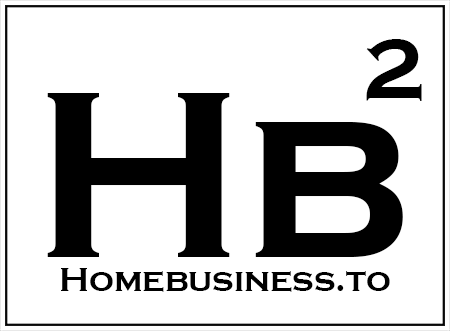
<style>
.page{position:relative;width:450px;height:331px;background:#ffffff}
.page>*{position:absolute;margin:0}
.t1{font:87.1px "CopperplateGothic-Bold";color:#000000}
.t2{font:246.1px "CopperplateGothic-Bold";color:#000000}
.t3{font:34.8px "CopperplateGothic-Bold";color:#000000}
</style>
<div class="page">
<p class="t1" style="left:366px;top:39px;width:56px;height:62px">2</p>
<p class="t2" style="left:47px;top:93px;width:356px;height:164px">Hb</p>
<p class="t3" style="left:61px;top:268px;width:329px;height:24px">Homebusiness.to</p>
</div>
